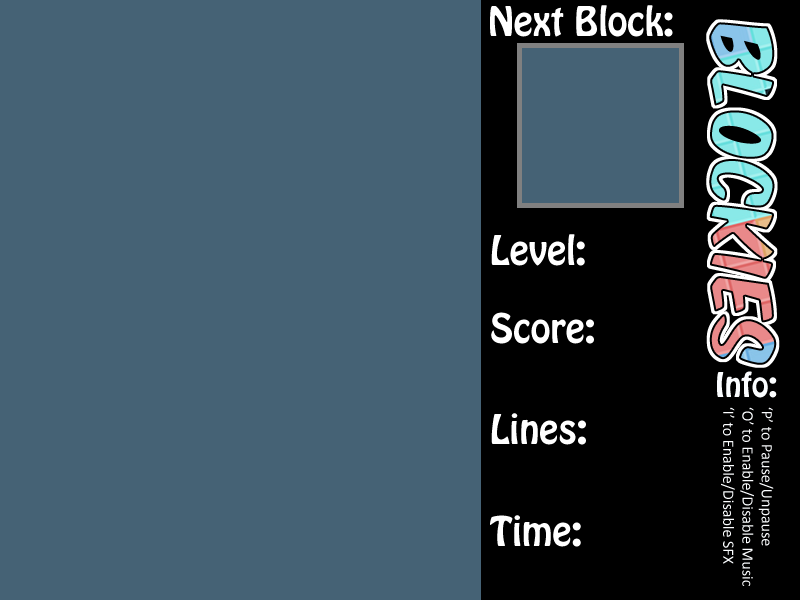
<style>
.page{position:relative;width:800px;height:600px;background:#456275}
.page>*{position:absolute;margin:0}
.t1{font:36px "HoboStd";color:#ffffff}
.t2{font:30px "HoboStd";color:#fbfdff}
.t3{font:16px "Calibri";color:#fbfdff}
</style>
<div class="page">
<p class="t1" style="left:490px;top:5px;width:183px;height:32px">Next Block:</p>
<p class="t1" style="left:491px;top:234px;width:94px;height:32px">Level:</p>
<p class="t1" style="left:491px;top:312px;width:103px;height:32px">Score:</p>
<p class="t2" style="left:717px;top:371px;width:60px;height:27px">Info:</p>
<p class="t1" style="left:491px;top:413px;width:95px;height:32px">Lines:</p>
<p class="t3" style="left:721px;top:407px;width:53px;height:179px;rotate:90deg">‘P’ to Pause/Unpause<br>‘O’ to Enable/Disable Music<br>‘I’ to Enable/Disable SFX</p>
<p class="t1" style="left:490px;top:515px;width:91px;height:32px">Time:</p>
</div>
